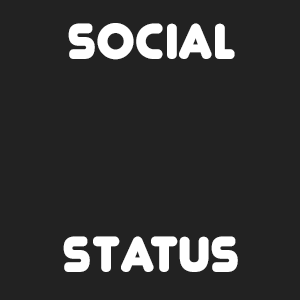
<style>
.page{position:relative;width:300px;height:300px;background:#222222}
.page>*{position:absolute;margin:0}
.t1{font:59.3px "Junegull";color:#ffffff}
</style>
<div class="page">
<p class="t1" style="left:63px;top:23px;width:175px;height:249px;text-align:center">Social<br><br><br>Status</p>
</div>
